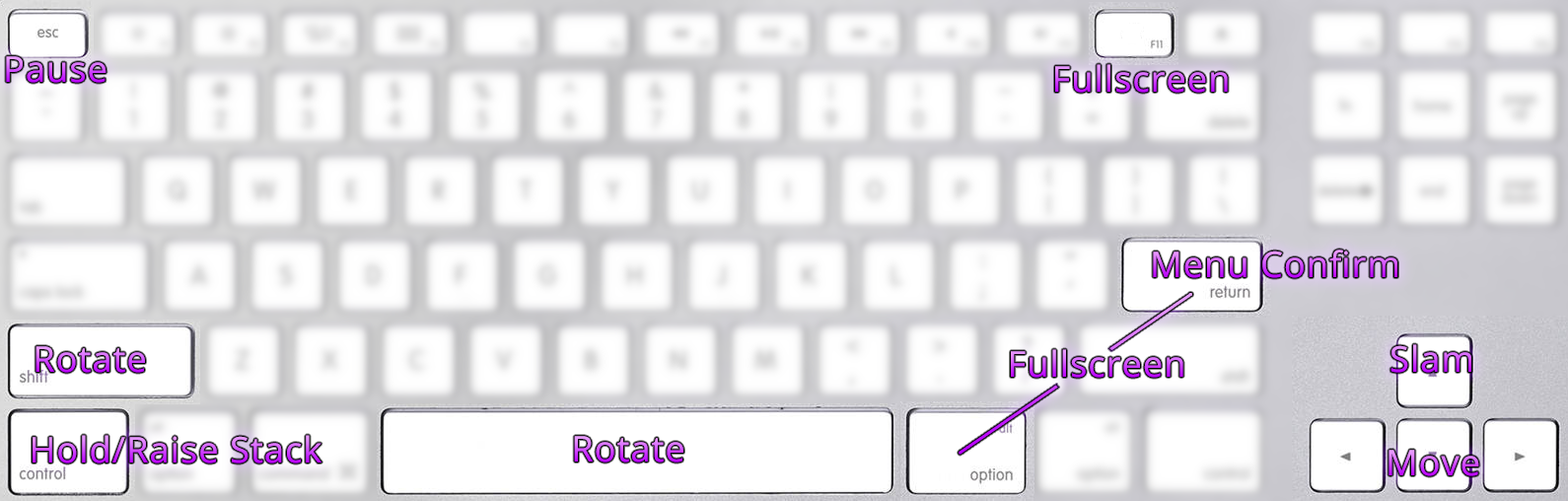
<style>
.page{position:relative;width:1568px;height:501px}
.page>*{position:absolute;margin:0}
.t1{font:35.5px "OpenSans";letter-spacing:0.032em}
</style>
<div class="page">
<p class="t1" style="left:6px;top:56px;width:101px;height:27px">Pause</p>
<p class="t1" style="left:1055px;top:64px;width:173px;height:29px">Fullscreen</p>
<p class="t1" style="left:1153px;top:249px;width:244px;height:29px">Menu Confirm</p>
<p class="t1" style="left:36px;top:346px;width:109px;height:27px">Rotate</p>
<p class="t1" style="left:1011px;top:349px;width:172px;height:29px">Fullscreen</p>
<p class="t1" style="left:1390px;top:344px;width:81px;height:29px">Slam</p>
<p class="t1" style="left:33px;top:435px;width:288px;height:28px">Hold/Raise Stack</p>
<p class="t1" style="left:574px;top:436px;width:109px;height:27px">Rotate</p>
<p class="t1" style="left:1389px;top:450px;width:90px;height:26px">Move</p>
</div>
